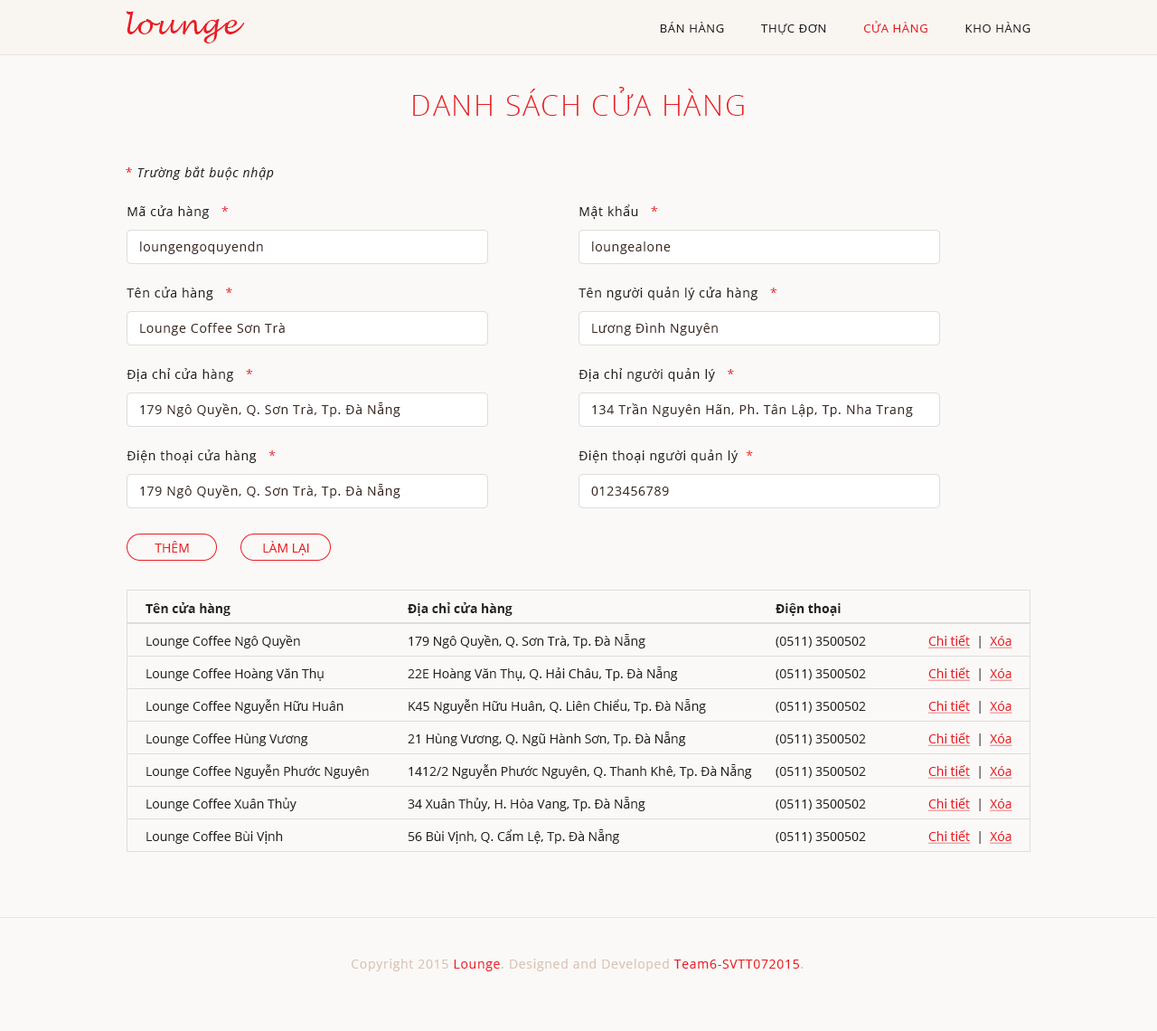
<style>
.page{position:relative;width:1157px;height:1031px;background:#fbf9f7}
.page>*{position:absolute;margin:0}
.t1{font:27.1px "LucidaHandwriting-Italic";letter-spacing:0.05em;color:#ea1d24}
.t2{font:11.8px "OpenSans";letter-spacing:0.05em;color:#222222}
.t3{font:11.8px "OpenSans";letter-spacing:0.05em;color:#ea1d24}
.t4{font:28.9px "OpenSans-Light";letter-spacing:0.05em;color:#ea1d24}
.t5{font:12.7px "OpenSans-Italic";letter-spacing:0.05em;color:#222222}
.t6{font:12.7px "OpenSans";letter-spacing:0.05em;color:#ea1d24}
.t7{font:12.7px "OpenSans";letter-spacing:0.05em;color:#222222}
.t8{font:12.7px "OpenSans";letter-spacing:0.05em;color:#3d2a23}
.t9{font:12.7px "OpenSans";color:#ea1d24}
.t10{font:12.7px/32.5px "OpenSans";color:#222222}
.t11{font:12.7px/32.5px "OpenSans-Bold";color:#222222}
.t12{font:12.7px/32.5px "OpenSans";color:#ea1d24;text-decoration:underline}
.t13{font:12.7px "OpenSans";letter-spacing:0.05em;color:#dac3b4}
.t14{font:12.7px "OpenSans";letter-spacing:0.05em;color:#ea1b23}
</style>
<div class="page">
<p class="t1" style="left:126px;top:11px;width:119px;height:32px">lounge</p>
<p class="t2" style="left:660px;top:21px;width:371px;height:13px">BÁN HÀNG          THỰC ĐƠN          <span class="t3">CỬA HÀNG</span>          KHO HÀNG</p>
<p class="t4" style="left:413px;top:87px;width:331px;height:29px">DANH SÁCH CỬA HÀNG</p>
<p class="t5" style="left:126px;top:166px;width:148px;height:14px"><span class="t6">* </span>Trường bắt buộc nhập</p>
<p class="t7" style="left:127px;top:205px;width:102px;height:14px">Mã cửa hàng   <span class="t6">*</span></p>
<p class="t7" style="left:579px;top:204px;width:79px;height:15px">Mật khẩu   <span class="t6">*</span></p>
<p class="t8" style="left:140px;top:241px;width:123px;height:13px">loungengoquyendn</p>
<p class="t8" style="left:592px;top:241px;width:79px;height:13px">loungealone</p>
<p class="t7" style="left:127px;top:287px;width:105px;height:13px">Tên cửa hàng   <span class="t6">*</span></p>
<p class="t7" style="left:579px;top:287px;width:198px;height:13px">Tên người quản lý cửa hàng   <span class="t6">*</span></p>
<p class="t8" style="left:140px;top:323px;width:145px;height:12px">Lounge Coffee Sơn Trà</p>
<p class="t8" style="left:592px;top:323px;width:126px;height:12px">Lương Đình Nguyên</p>
<p class="t7" style="left:127px;top:368px;width:126px;height:13px">Địa chỉ cửa hàng   <span class="t6">*</span></p>
<p class="t7" style="left:579px;top:368px;width:155px;height:13px">Địa chỉ người quản lý   <span class="t6">*</span></p>
<p class="t8" style="left:140px;top:402px;width:260px;height:15px">179 Ngô Quyền, Q. Sơn Trà, Tp. Đà Nẵng</p>
<p class="t8" style="left:592px;top:403px;width:321px;height:14px">134 Trần Nguyên Hãn, Ph. Tân Lập, Tp. Nha Trang</p>
<p class="t7" style="left:127px;top:449px;width:149px;height:14px">Điện thoại cửa hàng   <span class="t6">*</span></p>
<p class="t7" style="left:579px;top:449px;width:174px;height:14px">Điện thoại người quản lý  <span class="t6">*</span></p>
<p class="t8" style="left:140px;top:484px;width:260px;height:14px">179 Ngô Quyền, Q. Sơn Trà, Tp. Đà Nẵng</p>
<p class="t8" style="left:591px;top:486px;width:78px;height:9px">0123456789</p>
<p class="t9" style="left:155px;top:541px;width:34px;height:11px">THÊM</p>
<p class="t9" style="left:263px;top:541px;width:46px;height:14px">LÀM LẠI</p>
<p class="t10" style="left:146px;top:602px;width:223px;height:241px"><span class="t11">Tên cửa hàng<br></span>Lounge Coffee Ngô Quyền<br>Lounge Coffee Hoàng Văn Thụ<br>Lounge Coffee Nguyễn Hữu Huân<br>Lounge Coffee Hùng Vương<br>Lounge Coffee Nguyễn Phước Nguyên<br>Lounge Coffee Xuân Thủy<br>Lounge Coffee Bùi Vịnh</p>
<p class="t10" style="left:408px;top:602px;width:344px;height:241px"><span class="t11">Địa chỉ cửa hàng<br></span>179 Ngô Quyền, Q. Sơn Trà, Tp. Đà Nẵng<br>22E Hoàng Văn Thụ, Q. Hải Châu, Tp. Đà Nẵng<br>K45 Nguyễn Hữu Huân, Q. Liên Chiểu, Tp. Đà Nẵng<br>21 Hùng Vương, Q. Ngũ Hành Sơn, Tp. Đà Nẵng<br>1412/2 Nguyễn Phước Nguyên, Q. Thanh Khê, Tp. Đà Nẵng<br>34 Xuân Thủy, H. Hòa Vang, Tp. Đà Nẵng<br>56 Bùi Vịnh, Q. Cẩm Lệ, Tp. Đà Nẵng</p>
<p class="t10" style="left:776px;top:603px;width:90px;height:240px"><span class="t11">Điện thoại<br></span>(0511) 3500502<br>(0511) 3500502<br>(0511) 3500502<br>(0511) 3500502<br>(0511) 3500502<br>(0511) 3500502<br>(0511) 3500502</p>
<p class="t12" style="left:928px;top:635px;width:84px;height:208px">Chi tiết<span class="t10">  |  </span>Xóa<br>Chi tiết<span class="t10">  |  </span>Xóa<br>Chi tiết<span class="t10">  |  </span>Xóa<br>Chi tiết<span class="t10">  |  </span>Xóa<br>Chi tiết<span class="t10">  |  </span>Xóa<br>Chi tiết<span class="t10">  |  </span>Xóa<br>Chi tiết<span class="t10">  |  </span>Xóa</p>
<p class="t13" style="left:352px;top:958px;width:452px;height:13px">Copyright 2015 <span class="t14">Lounge</span>. Designed and Developed <span class="t14">Team6-SVTT072015</span>.</p>
</div>
